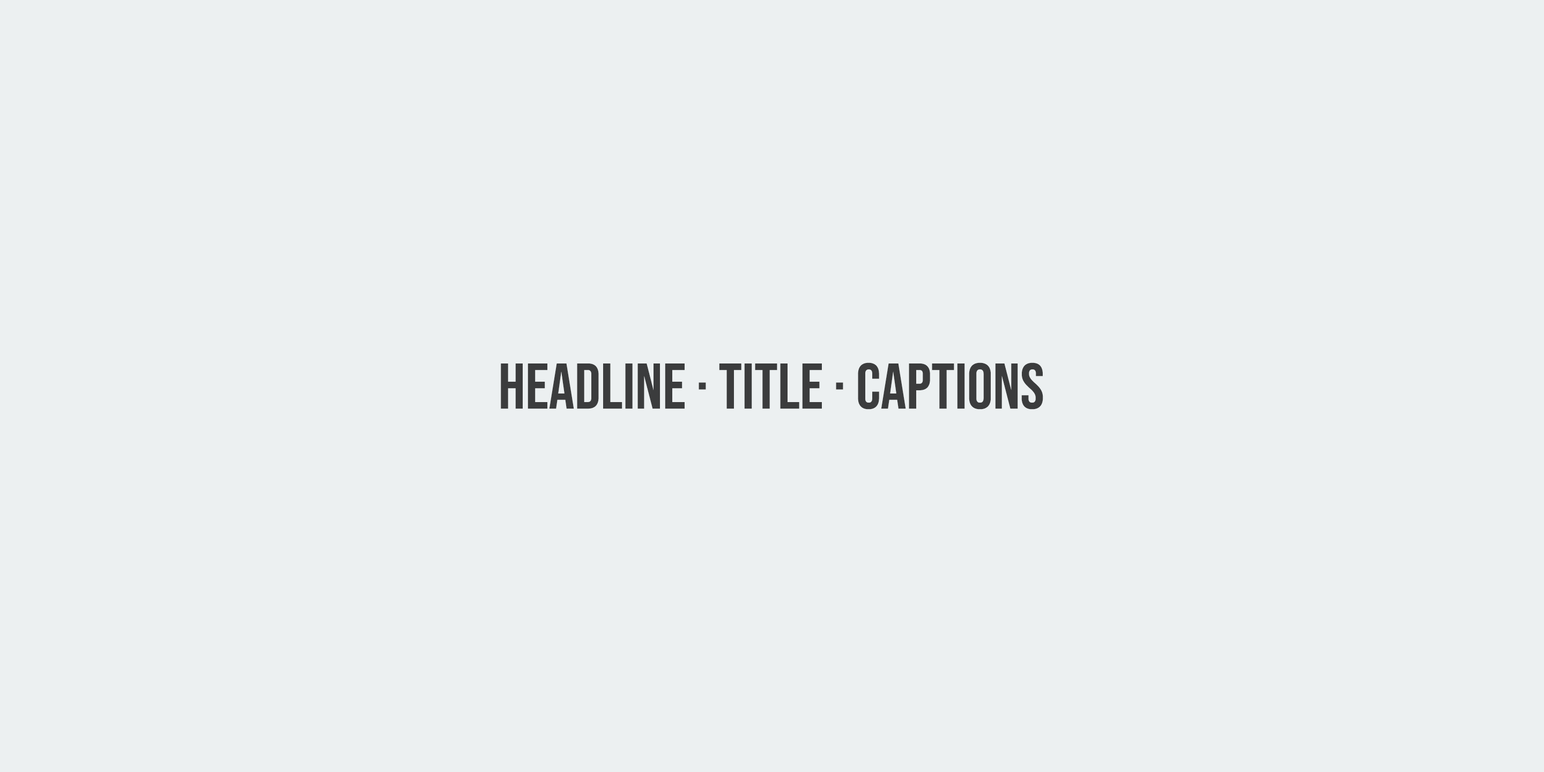
<style>
.page{position:relative;width:1544px;height:772px;background:#ecf0f1}
.page>*{position:absolute;margin:0}
.t1{font:64.3px "BebasNeue-Regular";color:#3b3c3d}
</style>
<div class="page">
<p class="t1" style="left:501px;top:362px;width:542px;height:48px">headline · title · captions</p>
</div>
